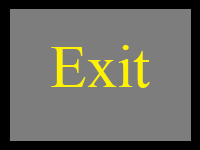
<style>
.page{position:relative;width:200px;height:150px;background:#7d7d7d}
.page>*{position:absolute;margin:0}
.t1{font:60px "TimesNewRomanPSMT";color:#fff200}
</style>
<div class="page">
<p class="t1" style="left:51px;top:45px;width:99px;height:43px">Exit</p>
</div>
